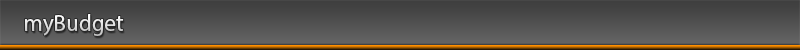
<style>
.page{position:relative;width:800px;height:50px}
.page>*{position:absolute;margin:0}
.t1{font:23.1px "MyriadPro-Regular";color:#e3e3e3}
</style>
<div class="page">
<p class="t1" style="left:25px;top:14px;width:99px;height:22px">myBudget</p>
</div>
